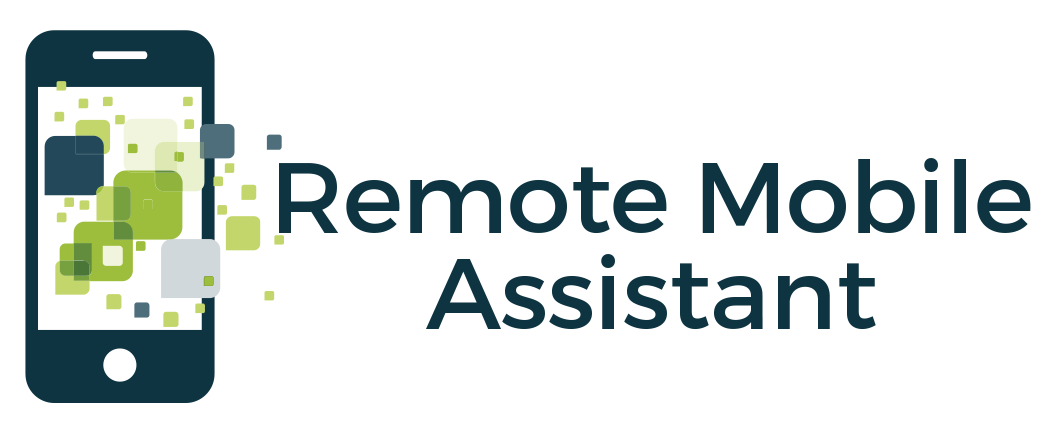
<style>
.page{position:relative;width:1057px;height:425px;background:#ffffff}
.page>*{position:absolute;margin:0}
.t1{font:100px/24px "Montserrat-Regular";letter-spacing:-0.01em;color:#0e3441}
</style>
<div class="page">
<p class="t1" style="left:279px;top:158px;width:752px;height:172px;text-align:center">Remote Mobile<br><br><br><br>Assistant</p>
</div>
